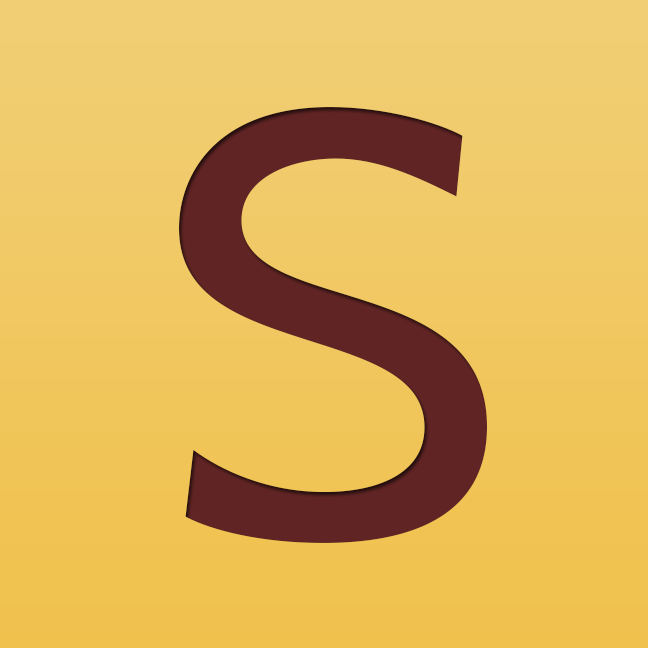
<style>
.page{position:relative;width:648px;height:648px}
.page>*{position:absolute;margin:0}
.t1{font:600px "Cabin-Regular";letter-spacing:0.12em;color:#612424}
</style>
<div class="page">
<p class="t1" style="left:179px;top:107px;width:308px;height:436px">S</p>
</div>
